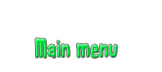
<style>
.page{position:relative;width:162px;height:72px;background:#ffffff}
.page>*{position:absolute;margin:0}
.t1{font:25px "CandyRoundBTNCond";letter-spacing:0.02em;font-weight:bold}
</style>
<div class="page">
<p class="t1" style="left:35px;top:38px;width:82px;height:20px">Main menu</p>
</div>
